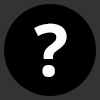
<style>
.page{position:relative;width:100px;height:100px;background:#000000}
.page>*{position:absolute;margin:0}
.t1{font:72px "OpenSans-Bold";color:#fffcfc}
</style>
<div class="page">
<p class="t1" style="left:34px;top:23px;width:33px;height:54px">?</p>
</div>
